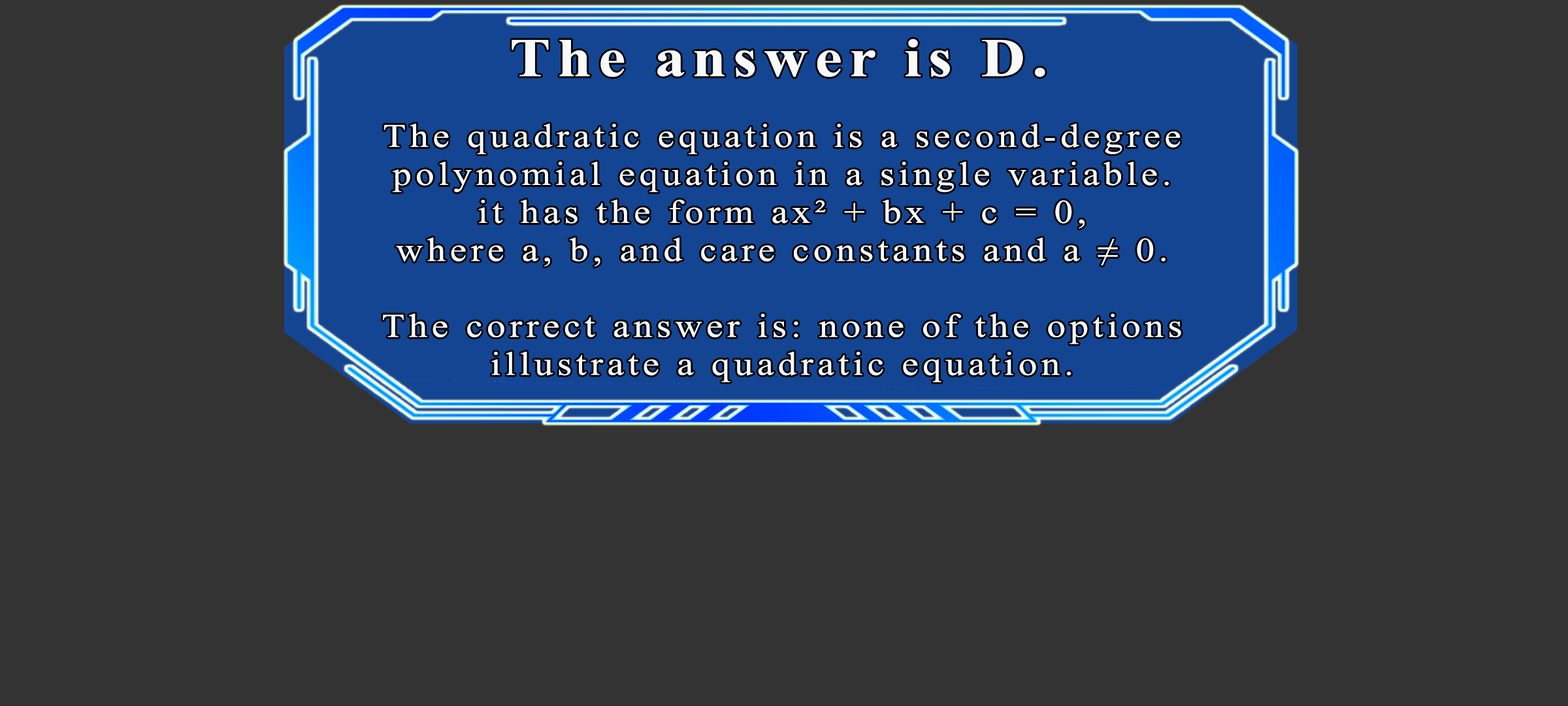
<style>
.page{position:relative;width:1568px;height:706px;background:#333333}
.page>*{position:absolute;margin:0}
.t1{font:54.4px "TimesNewRomanPS-BoldMT";letter-spacing:0.115em;color:#f7f9fb;scale:1.12 1}
.t2{font:33.2px/38px "TimesNewRomanPSMT";letter-spacing:0.115em;color:#f7f9fb;scale:1.12 1}
</style>
<div class="page">
<p class="t1" style="left:512px;top:39px;width:533px;height:38px">The answer is D.</p>
<p class="t2" style="left:383px;top:123px;width:798px;height:259px;text-align:center">The quadratic equation is a second-degree<br>polynomial equation in a single variable.<br>it has the form ax² + bx + c = 0,<br>where a, b, and care constants and a ≠ 0.<br><br>The correct answer is: none of the options<br>illustrate a quadratic equation.</p>
</div>
